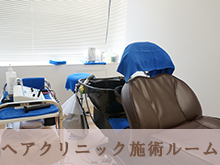
<style>
.page{position:relative;width:220px;height:165px}
.page>*{position:absolute;margin:0}
.t1{font:17px "HGSSoeiPresenceEB";letter-spacing:0.075em;color:#73523f}
</style>
<div class="page">
<p class="t1" style="left:1px;top:141px;width:217px;height:16px">ヘアクリニック施術ルーム</p>
</div>
